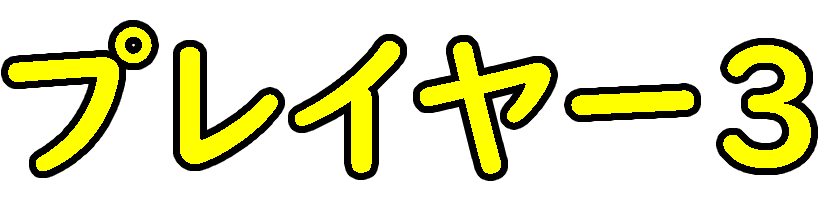
<style>
.page{position:relative;width:826px;height:200px;background:#ffffff}
.page>*{position:absolute;margin:0}
.t1{font:161.6px "UDDigiKyokashoNK-B";color:#ffff00}
</style>
<div class="page">
<p class="t1" style="left:8px;top:27px;width:803px;height:147px">プレイヤー3</p>
</div>
